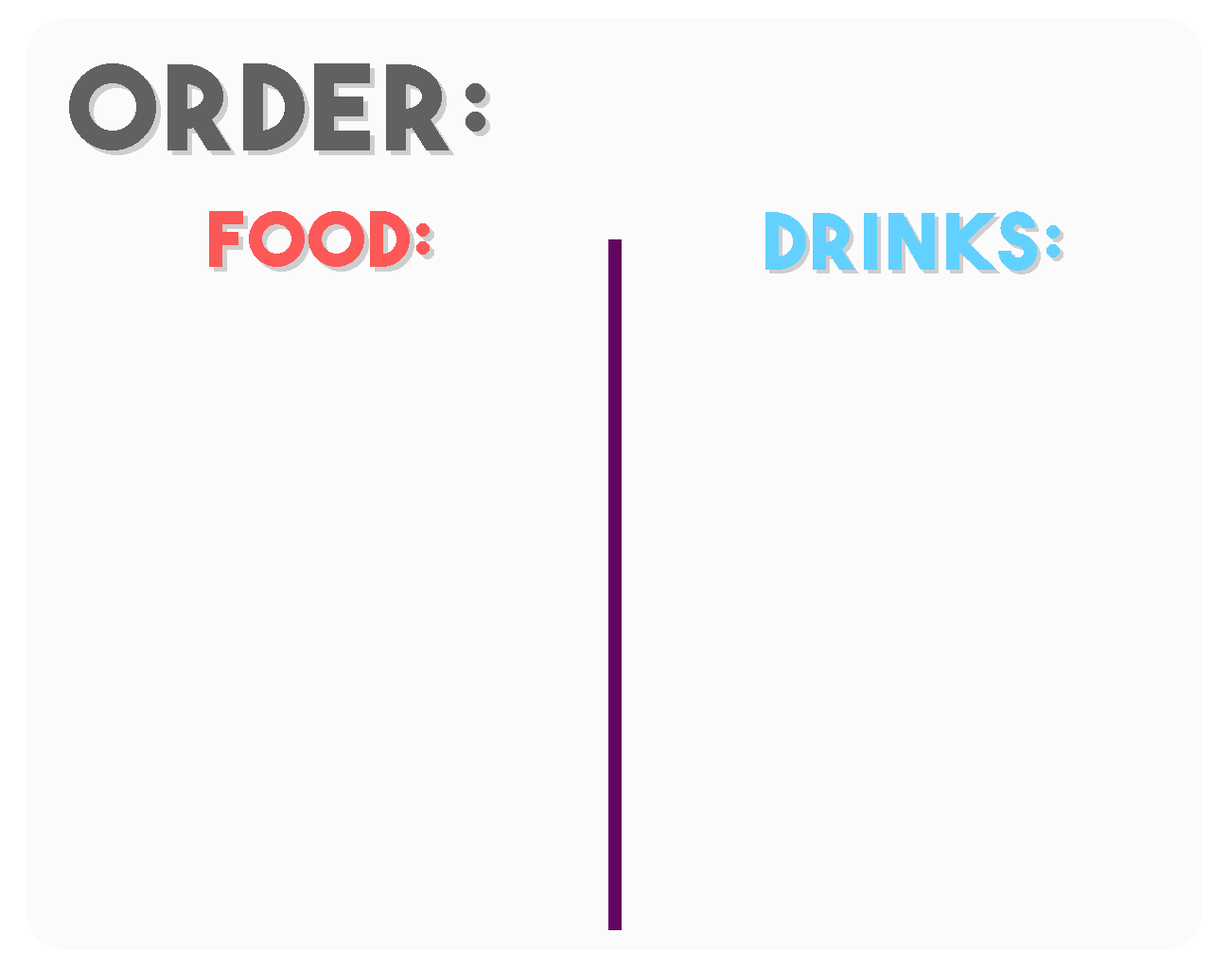
<style>
.page{position:relative;width:1230px;height:969px;background:#fbfbfb}
.page>*{position:absolute;margin:0}
.t1{font:118.4px "TheBoldFont";letter-spacing:0.05em;color:#626161}
.t2{font:76.1px "TheBoldFont";letter-spacing:0.05em;color:#fd5858}
.t3{font:77.5px "TheBoldFont";letter-spacing:0.05em;color:#62d1ff}
</style>
<div class="page">
<p class="t1" style="left:69px;top:63px;width:417px;height:87px">Order:</p>
<p class="t2" style="left:209px;top:211px;width:221px;height:56px">Food:</p>
<p class="t3" style="left:766px;top:211px;width:294px;height:60px">Drinks:</p>
</div>
